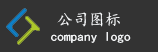
<style>
.page{position:relative;width:158px;height:52px;background:#333333}
.page>*{position:absolute;margin:0}
.t1{font:16px "¿¬Ìå";color:#fafcfe}
.t2{font:13.3px "¿¬Ìå";color:#fbfdfe}
</style>
<div class="page">
<p class="t1" style="left:57px;top:12px;width:63px;height:15px">公司图标</p>
<p class="t2" style="left:51px;top:32px;width:80px;height:11px">company logo</p>
</div>
